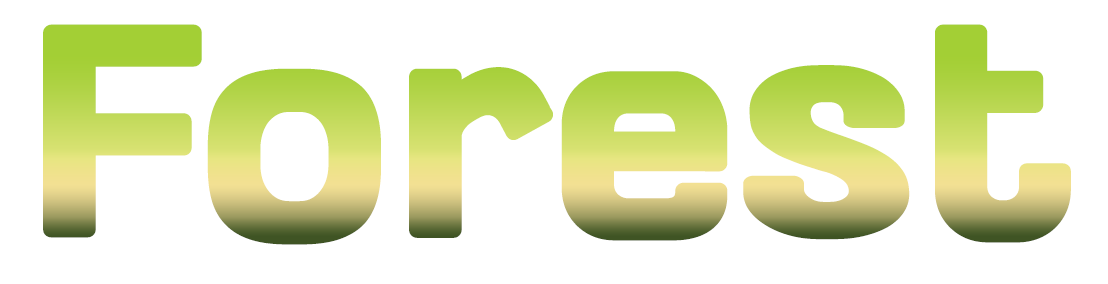
<style>
.page{position:relative;width:1108px;height:284px;background:#ffffff}
.page>*{position:absolute;margin:0}
.t1{font:251.9px "TTTogether"}
</style>
<div class="page">
<p class="t1" style="left:43px;top:24px;width:1028px;height:221px">Forest</p>
</div>
